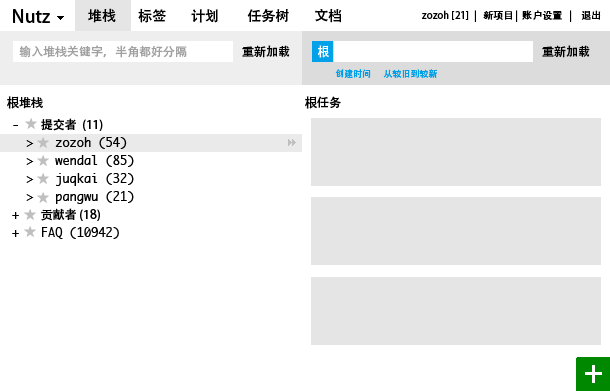
<style>
.page{position:relative;width:610px;height:391px;background:#ffffff}
.page>*{position:absolute;margin:0}
.t1{font:18px "AdobeHeitiStd-Regular";color:#000000}
.t2{font:14px "AdobeHeitiStd-Regular";color:#000000}
.t3{font:10px "AdobeHeitiStd-Regular";color:#000000}
.t4{font:12px "AdobeHeitiStd-Regular";color:#a0a0a0}
.t5{font:12px "AdobeHeitiStd-Regular";color:#000000}
.t6{font:12px "AdobeHeitiStd-Regular";color:#ffffff}
.t7{font:9px "AdobeHeitiStd-Regular";color:#00a0e9}
.t8{font:12px/18px "Monaco";color:#000000}
.t9{font:12px/18px "AdobeHeitiStd-Regular";color:#000000}
</style>
<div class="page">
<p class="t1" style="left:13px;top:9px;width:37px;height:14px">Nutz</p>
<p class="t2" style="left:88px;top:8px;width:254px;height:15px">堆栈       标签        计划         任务树        文档</p>
<p class="t3" style="left:422px;top:10px;width:179px;height:12px">zozoh [21]  |   新项目 |  账户设置   |    退出</p>
<p class="t4" style="left:19px;top:45px;width:168px;height:13px">输入堆栈关键字，半角都好分隔</p>
<p class="t5" style="left:242px;top:45px;width:48px;height:13px">重新加载</p>
<p class="t6" style="left:317px;top:45px;width:12px;height:13px">根</p>
<p class="t5" style="left:542px;top:45px;width:48px;height:13px">重新加载</p>
<p class="t7" style="left:335px;top:69px;width:103px;height:9px">创建时间      从较旧到较新</p>
<p class="t5" style="left:7px;top:96px;width:36px;height:13px">根堆栈</p>
<p class="t5" style="left:305px;top:96px;width:36px;height:13px">根任务</p>
<p class="t8" style="left:12px;top:118px;width:122px;height:121px">-   <span class="t9">提交者  (11)<br></span>  &gt;   zozoh (54)<br>  &gt;   wendal (85)<br>  &gt;   juqkai (32)<br>  &gt;   pangwu (21)<br>+   <span class="t9">贡献者 (18)<br></span>+   FAQ (10942)</p>
</div>
